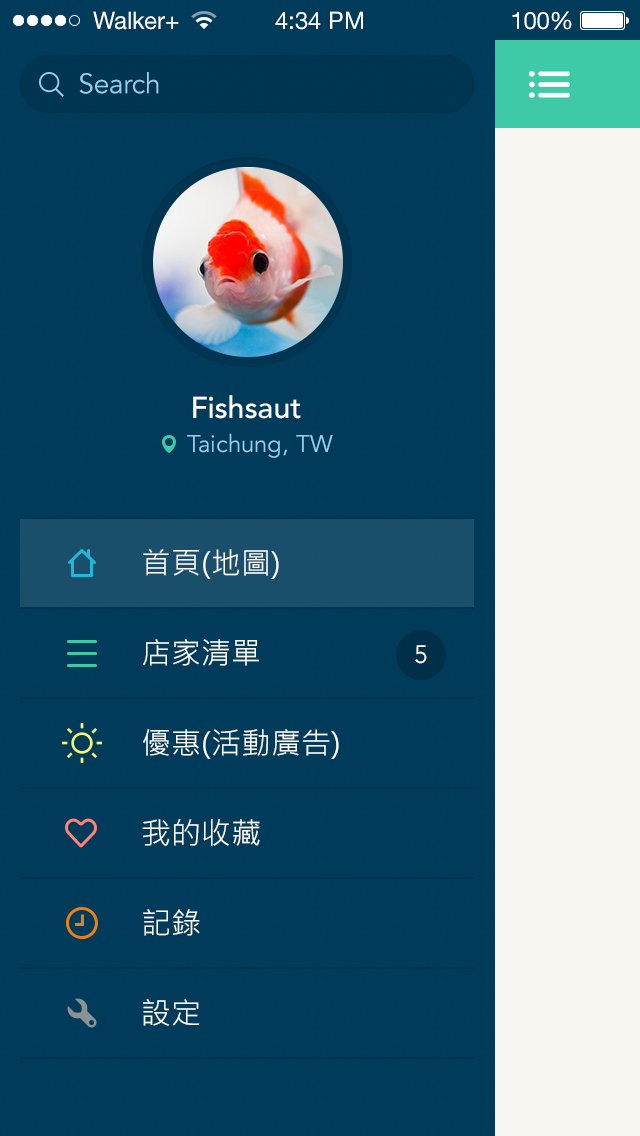
<style>
.page{position:relative;width:640px;height:1136px;background:#003b5b}
.page>*{position:absolute;margin:0}
.t1{font:24px "HelveticaNeueLTPro-Roman";color:#ffffff}
.t2{font:28px "AvenirLT-Book";letter-spacing:-0.01em;color:#96cfea}
.t3{font:30px "AvenirLT-Medium";color:#ffffff}
.t4{font:24px "AvenirLT-Book";color:#96cfea}
.t5{font:30px/90px "MicrosoftJhengHeiRegular";color:#ffffff}
.t6{font:25px "AvenirLT-Book";color:#ffffff}
</style>
<div class="page">
<p class="t1" style="left:93px;top:11px;width:86px;height:19px">Walker+</p>
<p class="t1" style="left:275px;top:11px;width:88px;height:19px">4:34 PM</p>
<p class="t1" style="left:512px;top:11px;width:60px;height:19px">100%</p>
<p class="t2" style="left:79px;top:72px;width:80px;height:22px">Search</p>
<p class="t3" style="left:193px;top:395px;width:108px;height:24px">Fishsaut</p>
<p class="t4" style="left:187px;top:433px;width:146px;height:25px">Taichung, TW</p>
<p class="t5" style="left:142px;top:549px;width:197px;height:477px">首頁(地圖)<br>店家清單<br>優惠(活動廣告)<br>我的收藏<br>記錄<br>設定</p>
<p class="t6" style="left:415px;top:645px;width:12px;height:19px">5</p>
</div>
